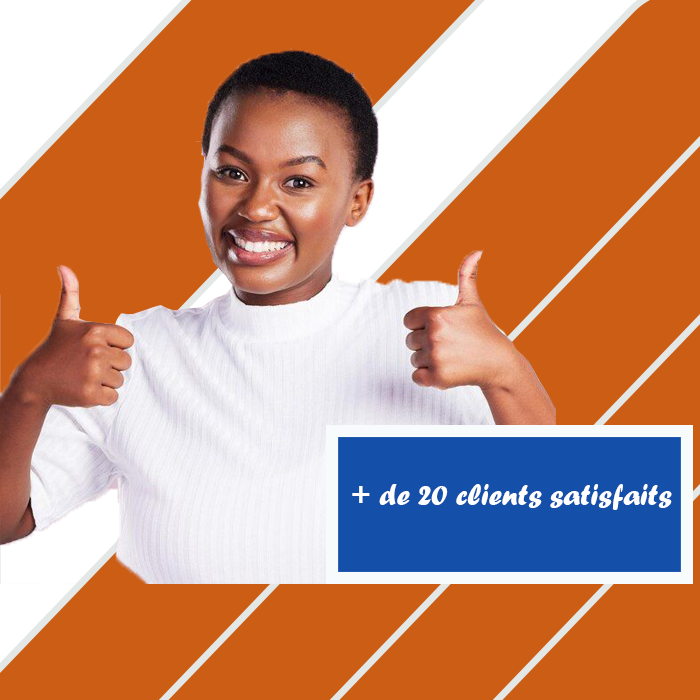
<style>
.page{position:relative;width:700px;height:700px;background:#cb5d14}
.page>*{position:absolute;margin:0}
.t1{font:30.5px "ForteMT";color:#ffffff}
</style>
<div class="page">
<p class="t1" style="left:352px;top:484px;width:320px;height:26px">+ de 20 clients satisfaits</p>
</div>
